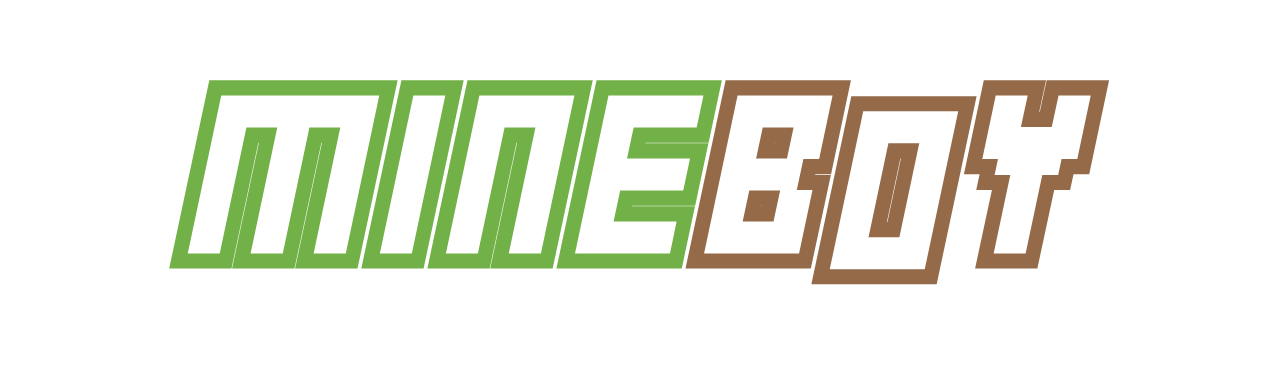
<style>
.page{position:relative;width:1280px;height:367px;background:#ffffff}
.page>*{position:absolute;margin:0}
.t1{font:193.8px "BotsmaticOutline-Italic";color:#72b147}
.t2{font:193.8px "BotsmaticOutline-Italic";color:#946a49}
</style>
<div class="page">
<p class="t1" style="left:169px;top:80px;width:941px;height:205px">mine<span class="t2">boy</span></p>
</div>
